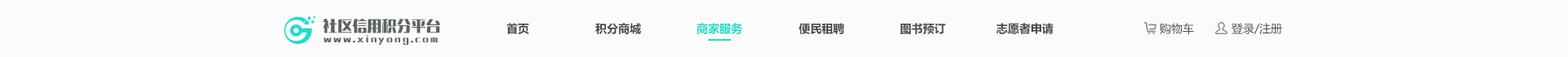
<style>
.page{position:relative;width:1568px;height:57px;background:#fcfbfb}
.page>*{position:absolute;margin:0}
.t1{font:14.8px "MFLangQian_Noncommercial-Bold";color:#5c6365}
.t2{font:11.4px "MicrosoftYaHei-Bold";color:#4a4a4a}
.t3{font:11.4px "MicrosoftYaHei-Bold";color:#21dccd}
.t4{font:11.4px "MicrosoftYaHei";color:#4a4a4a}
.t5{font:8.1px "MFLangQian_Noncommercial-Bold";letter-spacing:0.22em;color:#5c6365}
</style>
<div class="page">
<p class="t1" style="left:323px;top:19px;width:117px;height:14px">社区信用积分平台</p>
<p class="t2" style="left:506px;top:23px;width:23px;height:11px">首页</p>
<p class="t2" style="left:595px;top:23px;width:46px;height:11px">积分商城</p>
<p class="t3" style="left:697px;top:23px;width:45px;height:11px">商家服务</p>
<p class="t2" style="left:799px;top:23px;width:45px;height:11px">便民租聘</p>
<p class="t2" style="left:900px;top:23px;width:46px;height:11px">图书预订</p>
<p class="t2" style="left:996px;top:23px;width:58px;height:11px">志愿者申请</p>
<p class="t4" style="left:1160px;top:23px;width:34px;height:11px">购物车</p>
<p class="t4" style="left:1232px;top:23px;width:50px;height:11px">登录/注册</p>
<p class="t5" style="left:323px;top:35px;width:115px;height:10px">www.xinyong.com</p>
</div>
